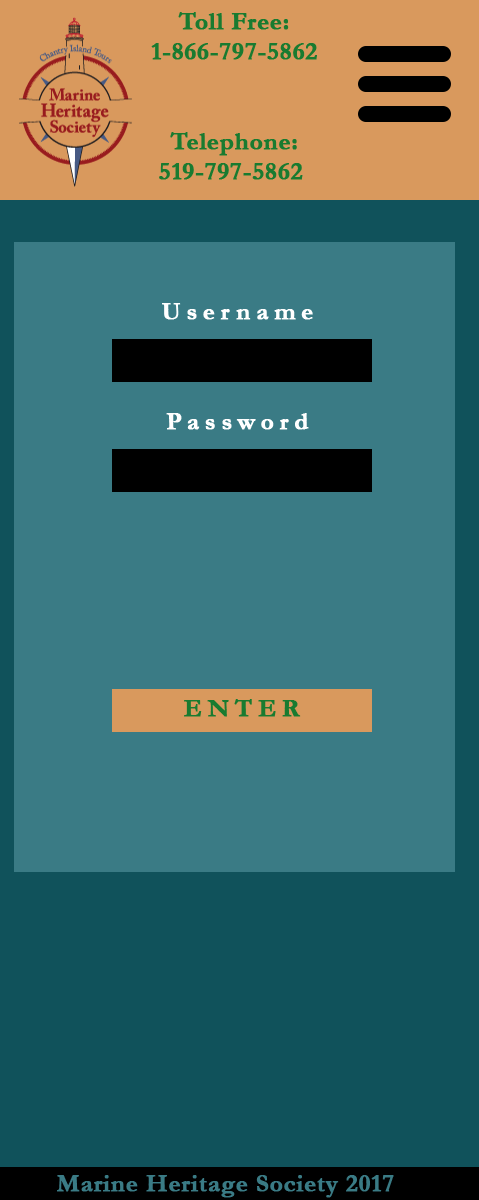
<style>
.page{position:relative;width:479px;height:1200px;background:#3a7b85}
.page>*{position:absolute;margin:0}
.t1{font:25px "Garamond-Bold";color:#197b30;font-weight:bold}
.t2{font:25px "Garamond-Bold";letter-spacing:0.2em;color:#ffffff;font-weight:bold}
.t3{font:25px "Garamond-Bold";letter-spacing:0.2em;color:#197b30;font-weight:bold}
.t4{font:25px "Garamond-Bold";color:#3a7b85;font-weight:bold}
</style>
<div class="page">
<p class="t1" style="left:151px;top:12px;width:166px;height:48px;text-align:center">Toll Free:<br>1-866-797-5862</p>
<p class="t1" style="left:159px;top:132px;width:144px;height:48px;text-align:center">Telephone:<br>519-797-5862</p>
<p class="t2" style="left:162px;top:303px;width:151px;height:17px">Username</p>
<p class="t2" style="left:166px;top:413px;width:143px;height:17px">Password</p>
<p class="t3" style="left:184px;top:699px;width:117px;height:18px">ENTER</p>
<p class="t4" style="left:57px;top:1175px;width:337px;height:23px">Marine Heritage Society 2017</p>
</div>
